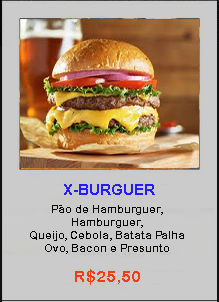
<style>
.page{position:relative;width:219px;height:302px;background:#cbcbcb}
.page>*{position:absolute;margin:0}
.t1{font:14.7px "Arial-BoldMT";color:#261cf4}
.t2{font:10.7px "ArialRoundedMTBold";color:#090909}
.t3{font:16px "ArialRoundedMTBold";color:#f33c12}
</style>
<div class="page">
<p class="t1" style="left:64px;top:184px;width:91px;height:11px">X-BURGUER</p>
<p class="t2" style="left:30px;top:205px;width:154px;height:49px;text-align:center">Pão de Hamburguer, Hamburguer,<br>Queijo, Cebola, Batata Palha<br>Ovo, Bacon e Presunto</p>
<p class="t3" style="left:75px;top:269px;width:65px;height:16px">R$25,50</p>
</div>
